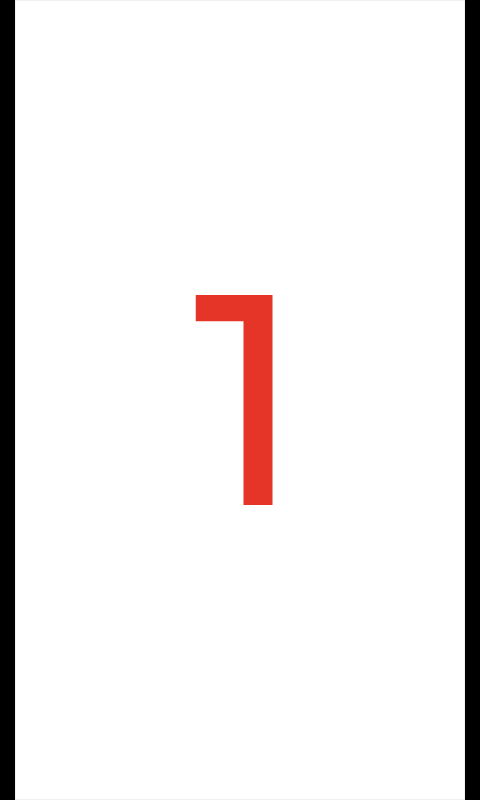
<style>
.page{position:relative;width:480px;height:800px;background:#ffffff}
.page>*{position:absolute;margin:0}
.t1{font:300px "Montserrat-Regular";letter-spacing:-0.01em;color:#e53428}
</style>
<div class="page">
<p class="t1" style="left:195px;top:295px;width:78px;height:210px">1</p>
</div>
